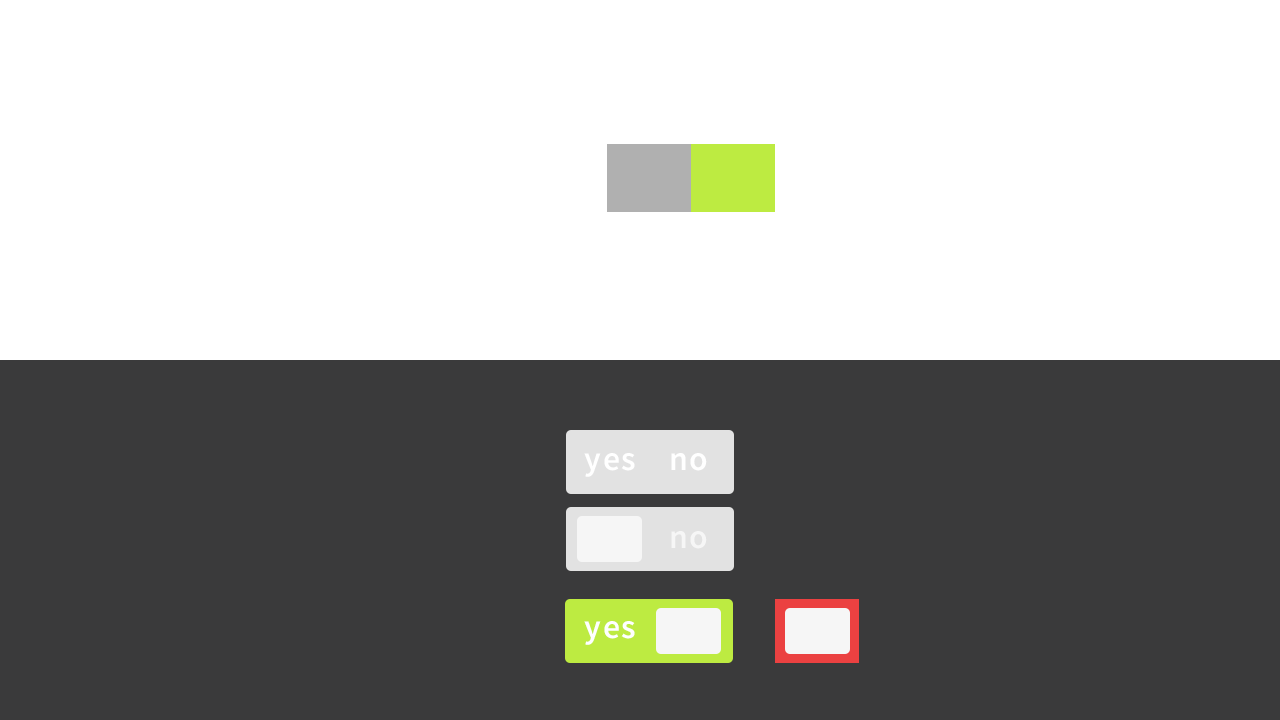
<style>
.page{position:relative;width:1280px;height:720px;background:#ffffff}
.page>*{position:absolute;margin:0}
.t1{font:33.8px "SourceSansPro-Semibold";letter-spacing:0.05em;color:#ffffff}
.t2{font:33.8px "SourceSansPro-Semibold";letter-spacing:0.05em;color:#f6f6f6}
</style>
<div class="page">
<p class="t1" style="left:584px;top:453px;width:51px;height:24px">yes</p>
<p class="t1" style="left:671px;top:453px;width:36px;height:18px">no</p>
<p class="t2" style="left:671px;top:531px;width:36px;height:18px">no</p>
<p class="t1" style="left:584px;top:621px;width:51px;height:24px">yes</p>
</div>
